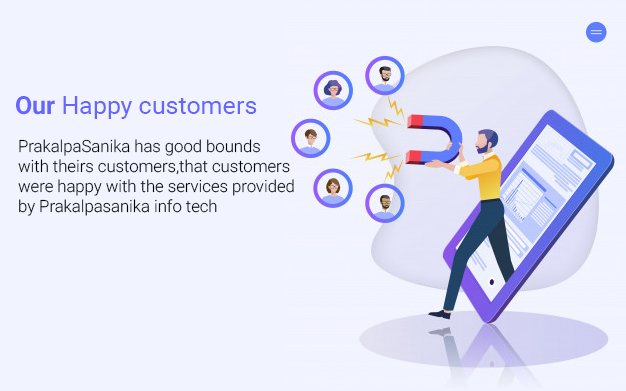
<style>
.page{position:relative;width:626px;height:391px;background:#f1f3ff}
.page>*{position:absolute;margin:0}
.t1{font:25px "Roboto-Regular";color:#6666ff}
.t2{font:25px "Roboto-Bold";color:#6666ff}
.t3{font:16.7px "Roboto-Light";color:#000000}
</style>
<div class="page">
<p class="t1" style="left:16px;top:96px;width:241px;height:23px"><span class="t2">Our</span> Happy customers</p>
<p class="t3" style="left:18px;top:139px;width:276px;height:77px">PrakalpaSanika has good bounds <br>with theirs customers,that customers<br>were happy with the services provided<br>by Prakalpasanika info tech</p>
</div>
